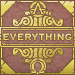
<style>
.page{position:relative;width:75px;height:75px}
.page>*{position:absolute;margin:0}
.t1{font:9.3px "CopperplateGothic-Bold";letter-spacing:0.1em;scale:0.9 1}
</style>
<div class="page">
<p class="t1" style="left:3px;top:33px;width:69px;height:8px">EVERYTHING</p>
</div>
